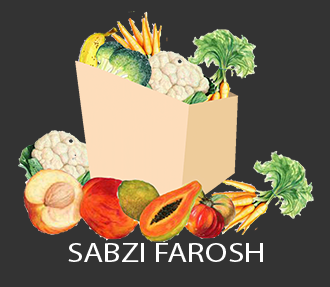
<style>
.page{position:relative;width:330px;height:287px;background:#333333}
.page>*{position:absolute;margin:0}
.t1{font:27.1px "MyriadPro-Regular";color:#ffffff;scale:1.21 1}
</style>
<div class="page">
<p class="t1" style="left:68px;top:243px;width:195px;height:19px">SABZI FAROSH</p>
</div>
